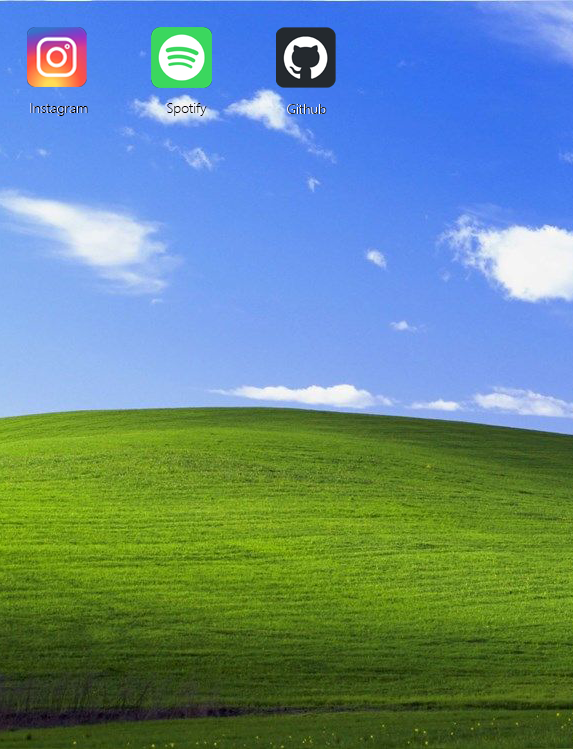
<style>
.page{position:relative;width:573px;height:749px}
.page>*{position:absolute;margin:0}
.t1{font:14px "SegoeUI-Light"}
.t2{font:14px "SegoeUI-Light";color:#000000}
.t3{font:14px "SegoeUI-Light";color:#24292e}
</style>
<div class="page">
<p class="t1" style="left:30px;top:103px;width:57px;height:13px">Instagram</p>
<p class="t2" style="left:31px;top:103px;width:57px;height:13px">Instagram</p>
<p class="t2" style="left:167px;top:103px;width:40px;height:13px">Spotify</p>
<p class="t1" style="left:287px;top:104px;width:39px;height:10px">Github</p>
<p class="t3" style="left:288px;top:104px;width:39px;height:10px">Github</p>
</div>
